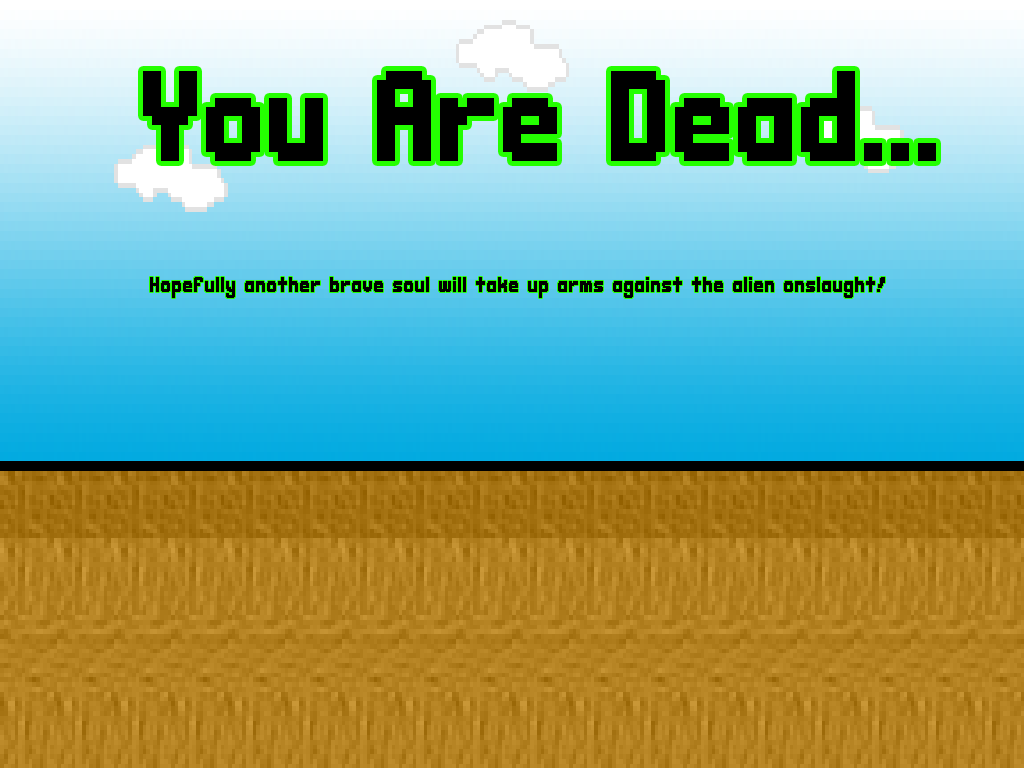
<style>
.page{position:relative;width:1024px;height:768px}
.page>*{position:absolute;margin:0}
.t1{font:72px "CasualEncounter";color:#000000}
.t2{font:12px "CasualEncounter";color:#000000}
</style>
<div class="page">
<p class="t1" style="left:143px;top:71px;width:793px;height:90px">You Are Dead...</p>
<p class="t2" style="left:150px;top:277px;width:735px;height:21px">Hopefully another brave soul will take up arms against the alien onslaught!</p>
</div>
